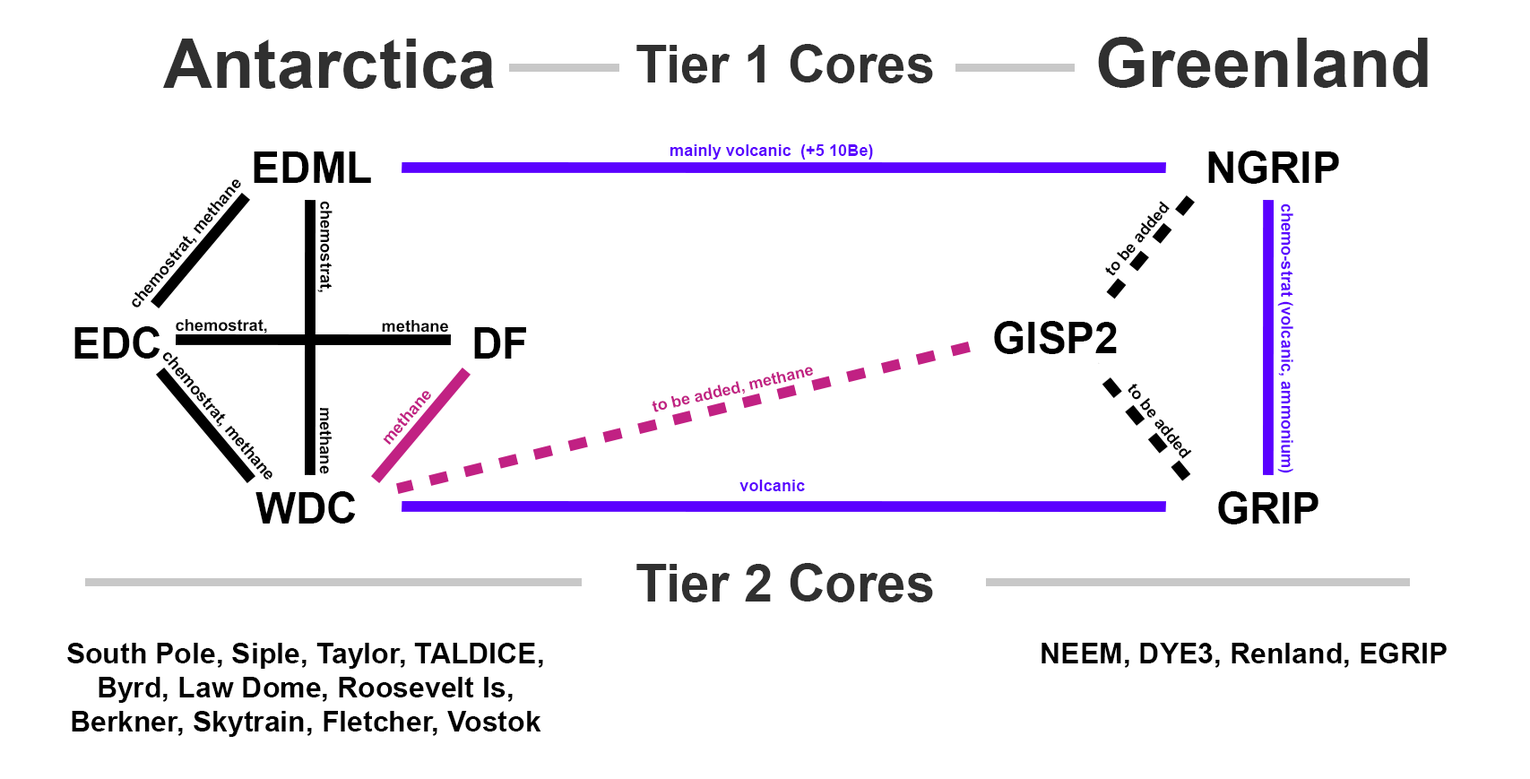
<style>
.page{position:relative;width:1530px;height:779px;background:#ffffff}
.page>*{position:absolute;margin:0}
.t1{font:68.1px "Arial-BoldMT";color:#303030}
.t2{font:52px "Arial-BoldMT";color:#303030}
.t3{font:16.4px "Arial-BoldMT";color:#5a00ff}
.t4{font:42.7px "Arial-BoldMT";color:#000000}
.t5{font:16.4px "Arial-BoldMT";color:#000000}
.t6{font:16.1px "Arial-BoldMT";color:#000000}
.t7{font:16.1px "Arial-BoldMT";color:#c12183}
.t8{font:16.4px "Arial-BoldMT";color:#c12183}
.t9{font:28.7px "Arial-BoldMT";color:#000000}
</style>
<div class="page">
<p class="t1" style="left:163px;top:39px;width:331px;height:50px">Antarctica</p>
<p class="t1" style="left:1098px;top:37px;width:330px;height:51px">Greenland</p>
<p class="t2" style="left:637px;top:44px;width:296px;height:39px">Tier 1 Cores</p>
<p class="t3" style="left:671px;top:144px;width:202px;height:16px">mainly volcanic  (+5 10Be)</p>
<p class="t4" style="left:254px;top:152px;width:117px;height:31px">EDML</p>
<p class="t4" style="left:1209px;top:151px;width:130px;height:33px">NGRIP</p>
<p class="t5" style="left:132px;top:179px;width:109px;height:129px;rotate:-50deg">chemostrat, methane</p>
<p class="t5" style="left:317px;top:201px;width:16px;height:273px;rotate:90deg">chemostrat,                         methane</p>
<p class="t6" style="left:1105px;top:201px;width:65px;height:75px;rotate:-50deg">to be added</p>
<p class="t3" style="left:1278px;top:204px;width:16px;height:269px;rotate:90deg">chemo-strat (volcanic, ammonium)</p>
<p class="t4" style="left:74px;top:326px;width:86px;height:33px">EDC</p>
<p class="t5" style="left:176px;top:319px;width:272px;height:15px">chemostrat,                         methane</p>
<p class="t4" style="left:474px;top:327px;width:52px;height:32px">DF</p>
<p class="t4" style="left:994px;top:321px;width:123px;height:33px">GISP2</p>
<p class="t5" style="left:162px;top:352px;width:111px;height:128px;rotate:50deg">chemostrat, methane</p>
<p class="t7" style="left:652px;top:367px;width:161px;height:45px;rotate:-13deg">to be added, methane</p>
<p class="t6" style="left:1128px;top:384px;width:64px;height:75px;rotate:51deg">to be added</p>
<p class="t8" style="left:383px;top:391px;width:48px;height:55px;rotate:-50deg">methane</p>
<p class="t3" style="left:740px;top:480px;width:65px;height:11px">volcanic</p>
<p class="t4" style="left:256px;top:491px;width:100px;height:33px">WDC</p>
<p class="t4" style="left:1218px;top:491px;width:101px;height:34px">GRIP</p>
<p class="t2" style="left:637px;top:563px;width:296px;height:40px">Tier 2 Cores</p>
<p class="t9" style="left:67px;top:643px;width:476px;height:94px;text-align:center">South Pole, Siple, Taylor, TALDICE,<br>Byrd, Law Dome, Roosevelt Is,<br>Berkner, Skytrain, Fletcher, Vostok</p>
<p class="t9" style="left:1042px;top:643px;width:405px;height:25px">NEEM, DYE3, Renland, EGRIP</p>
</div>
